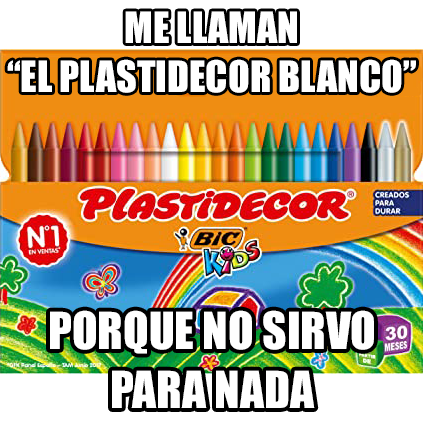
<style>
.page{position:relative;width:423px;height:423px;background:#ffffff}
.page>*{position:absolute;margin:0}
.t1{font:40.1px "Impact";color:#ffffff}
.t2{font:47.2px "Impact";color:#ffffff}
</style>
<div class="page">
<p class="t1" style="left:7px;top:11px;width:409px;height:82px;text-align:center">ME LLAMAN<br>“EL PLASTIDECOR BLANCO”</p>
<p class="t2" style="left:50px;top:310px;width:324px;height:98px;text-align:center">PORQUE NO SIRVO<br>PARA NADA</p>
</div>
